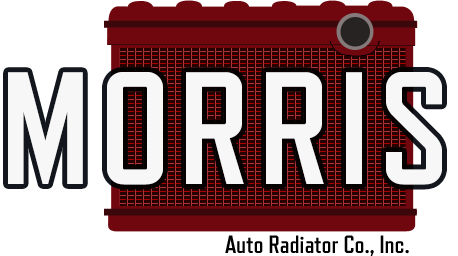
<style>
.page{position:relative;width:458px;height:256px;background:#ffffff}
.page>*{position:absolute;margin:0}
.t1{font:159.7px "RefrigeratorDeluxe-Bold";letter-spacing:0.05em;color:#f7f7f7}
.t2{font:25px "RefrigeratorDeluxe-Bold";color:#000000}
</style>
<div class="page">
<p class="t1" style="left:8px;top:72px;width:434px;height:113px">MORRIS</p>
<p class="t2" style="left:225px;top:235px;width:184px;height:21px">Auto Radiator Co., Inc.</p>
</div>
